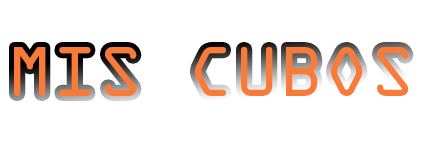
<style>
.page{position:relative;width:425px;height:142px;background:#ffffff}
.page>*{position:absolute;margin:0}
.t1{font:63px "OCRAStd";color:#f87b3a}
</style>
<div class="page">
<p class="t1" style="left:14px;top:47px;width:395px;height:49px">MIS CUBOS</p>
</div>
